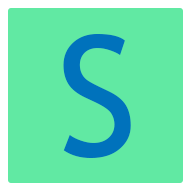
<style>
.page{position:relative;width:192px;height:192px;background:#61e9a3}
.page>*{position:absolute;margin:0}
.t1{font:166.7px "TrebuchetMS";color:#0072bc}
</style>
<div class="page">
<p class="t1" style="left:63px;top:34px;width:68px;height:124px">S</p>
</div>
